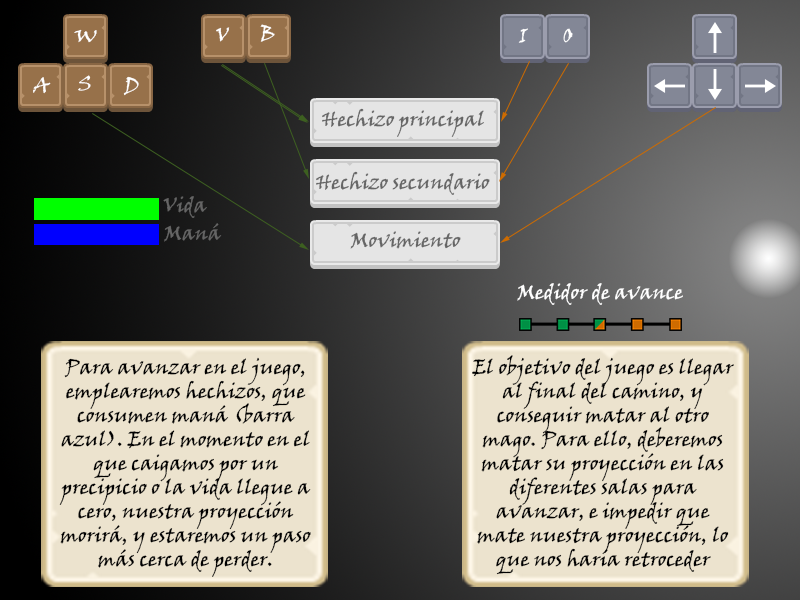
<style>
.page{position:relative;width:800px;height:600px}
.page>*{position:absolute;margin:0}
.t1{font:20.1px "VinerHandITC";color:#ffffff}
.t2{font:20.1px "VinerHandITC";color:#ffffff;scale:0.97 1}
.t3{font:20px "VinerHandITC";color:#ffffff}
.t4{font:20px "VinerHandITC";color:#656565}
.t5{font:20.1px "VinerHandITC";color:#656565}
.t6{font:20px "VinerHandITC";color:#000000}
</style>
<div class="page">
<p class="t1" style="left:74px;top:29px;width:23px;height:14px">W</p>
<p class="t2" style="left:216px;top:27px;width:14px;height:15px">V</p>
<p class="t3" style="left:260px;top:24px;width:15px;height:18px">B</p>
<p class="t1" style="left:518px;top:28px;width:10px;height:15px">I</p>
<p class="t1" style="left:563px;top:28px;width:10px;height:15px">O</p>
<p class="t2" style="left:33px;top:77px;width:18px;height:17px">A</p>
<p class="t1" style="left:78px;top:75px;width:13px;height:16px">S</p>
<p class="t1" style="left:123px;top:76px;width:16px;height:20px">D</p>
<p class="t4" style="left:322px;top:108px;width:162px;height:29px">Hechizo principal</p>
<p class="t4" style="left:316px;top:171px;width:174px;height:24px">Hechizo secundario</p>
<p class="t4" style="left:163px;top:196px;width:44px;height:22px">Vida</p>
<p class="t5" style="left:164px;top:223px;width:58px;height:19px">Maná</p>
<p class="t4" style="left:350px;top:231px;width:111px;height:18px">Movimiento</p>
<p class="t3" style="left:517px;top:283px;width:166px;height:22px">Medidor de avance</p>
<p class="t6" style="left:59px;top:357px;width:252px;height:220px;text-align:center">Para avanzar en el juego, emplearemos hechizos, que consumen maná (barra azul). En el momento en el que caigamos por un precipicio o la vida llegue a cero, nuestra proyección morirá, y estaremos un paso más cerca de perder.</p>
<p class="t6" style="left:472px;top:355px;width:262px;height:220px;text-align:center">El objetivo del juego es llegar al final del camino, y conseguir matar al otro mago. Para ello, deberemos matar su proyección en las diferentes salas para avanzar, e impedir que mate nuestra proyección, lo que nos haría retroceder</p>
</div>
